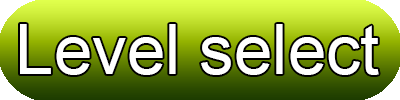
<style>
.page{position:relative;width:400px;height:100px}
.page>*{position:absolute;margin:0}
.t1{font:68.9px "ArialMT";color:#ffffff}
</style>
<div class="page">
<p class="t1" style="left:20px;top:24px;width:359px;height:51px">Level select</p>
</div>
